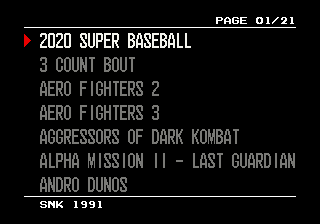
<style>
.page{position:relative;width:320px;height:224px;background:#000000}
.page>*{position:absolute;margin:0}
.t1{font:8px/24px "NEOGEOSystemFont";color:#797976;text-transform:uppercase}
</style>
<div class="page">
<p class="t1" style="left:40px;top:33px;width:255px;height:159px">2020 Super Baseball             <br>3 Count Bout       <br>Aero Fighters 2  <br>Aero Fighters 3  <br>Aggressors of Dark Kombat       <br>Alpha Mission II - Last Guardian<br>Andro Dunos</p>
</div>
